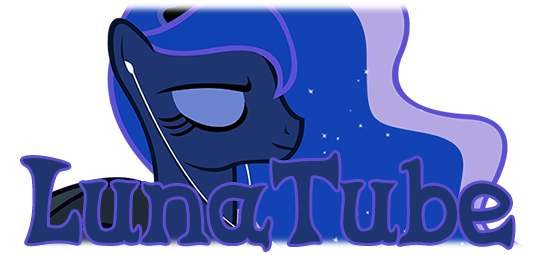
<style>
.page{position:relative;width:538px;height:255px;background:#ffffff}
.page>*{position:absolute;margin:0}
.t1{font:130px "CelestiaReduxMedium";color:#1f3570}
</style>
<div class="page">
<p class="t1" style="left:22px;top:152px;width:491px;height:98px">LunaTube</p>
</div>
